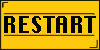
<style>
.page{position:relative;width:100px;height:50px;background:#ffc90e}
.page>*{position:absolute;margin:0}
.t1{font:22.7px "Silom";color:#000000}
</style>
<div class="page">
<p class="t1" style="left:4px;top:16px;width:92px;height:17px">RESTART</p>
</div>
